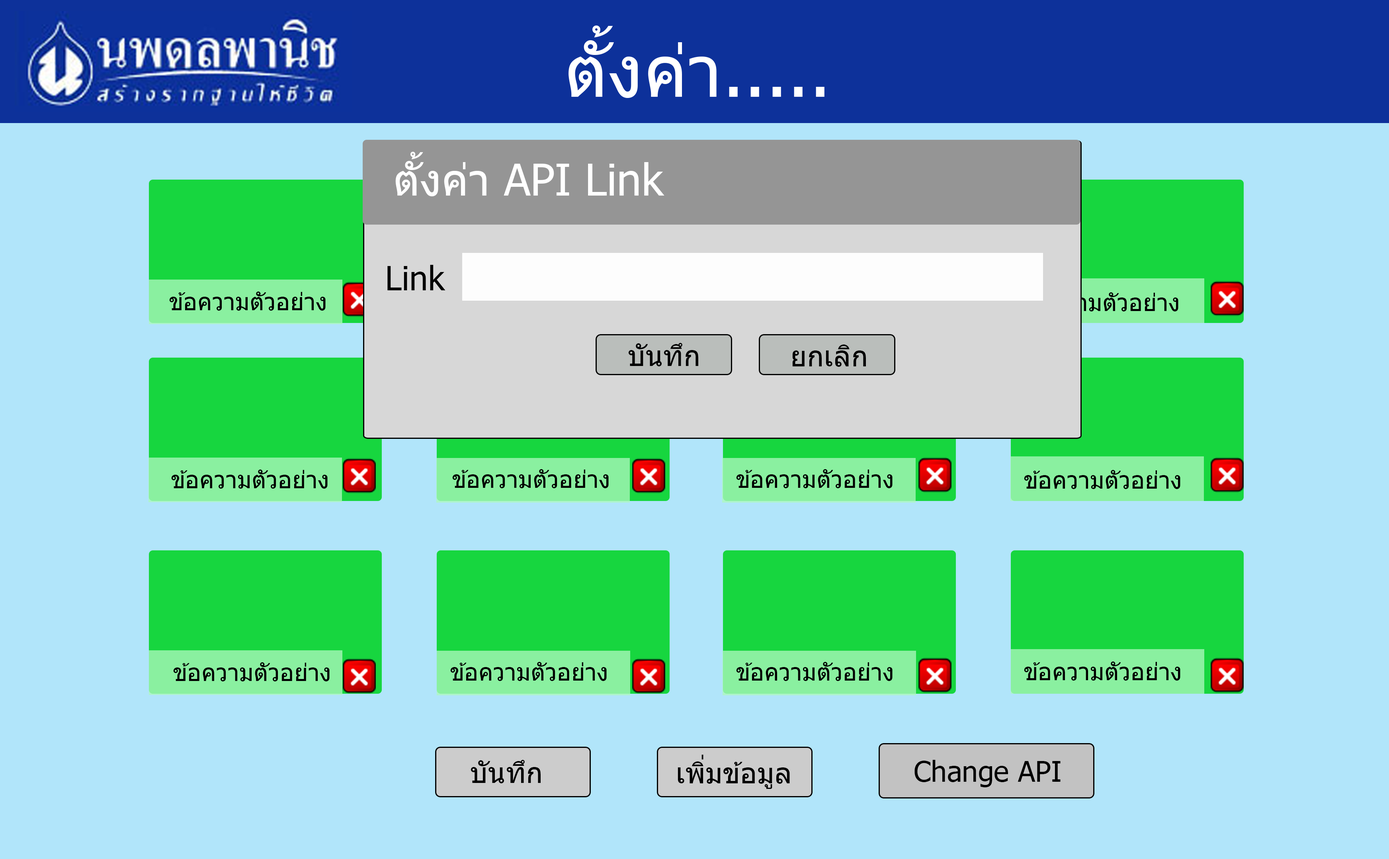
<style>
.page{position:relative;width:1389px;height:859px;background:#b1e5fa}
.page>*{position:absolute;margin:0}
.t1{font:43.9px "Tahoma";color:#ffffff}
.t2{font:33.5px "Tahoma";color:#000000}
.t3{font:23.9px "Tahoma";color:#000000}
.t4{font:28.7px "Tahoma";color:#000000}
</style>
<div class="page">
<p class="t1" style="left:395px;top:152px;width:269px;height:44px">ตั้งค่า API Link</p>
<p class="t2" style="left:387px;top:265px;width:58px;height:25px">Link</p>
<p class="t3" style="left:169px;top:291px;width:157px;height:19px">ข้อความตัวอย่าง</p>
<p class="t3" style="left:1022px;top:292px;width:156px;height:19px">ข้อความตัวอย่าง</p>
<p class="t4" style="left:628px;top:343px;width:70px;height:23px">บันทึก</p>
<p class="t4" style="left:792px;top:344px;width:74px;height:23px">ยกเลิก</p>
<p class="t3" style="left:171px;top:469px;width:157px;height:19px">ข้อความตัวอย่าง</p>
<p class="t3" style="left:452px;top:469px;width:157px;height:19px">ข้อความตัวอย่าง</p>
<p class="t3" style="left:736px;top:469px;width:156px;height:19px">ข้อความตัวอย่าง</p>
<p class="t3" style="left:1024px;top:470px;width:156px;height:19px">ข้อความตัวอย่าง</p>
<p class="t3" style="left:173px;top:662px;width:157px;height:19px">ข้อความตัวอย่าง</p>
<p class="t3" style="left:450px;top:662px;width:157px;height:19px">ข้อความตัวอย่าง</p>
<p class="t3" style="left:736px;top:662px;width:156px;height:19px">ข้อความตัวอย่าง</p>
<p class="t3" style="left:1024px;top:661px;width:156px;height:19px">ข้อความตัวอย่าง</p>
<p class="t4" style="left:470px;top:759px;width:71px;height:24px">บันทึก</p>
<p class="t4" style="left:677px;top:754px;width:113px;height:35px">เพิ่มข้อมูล</p>
<p class="t4" style="left:914px;top:759px;width:146px;height:28px">Change API</p>
</div>
